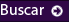
<style>
.page{position:relative;width:69px;height:22px;background:#300746}
.page>*{position:absolute;margin:0}
.t1{font:16px "MyriadPro-Regular";color:#ffffff}
</style>
<div class="page">
<p class="t1" style="left:1px;top:4px;width:43px;height:11px">Buscar</p>
</div>
